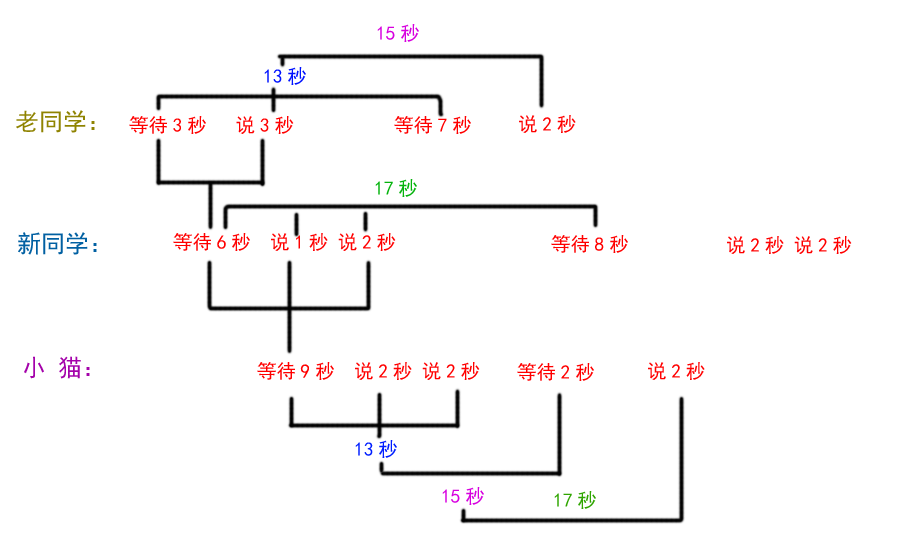
<style>
.page{position:relative;width:902px;height:546px;background:#ffffff}
.page>*{position:absolute;margin:0}
.t1{font:19.4px "SimHei";color:#d700df}
.t2{font:19.4px "SimHei";color:#0012ff}
.t3{font:24px "SimHei";color:#8f8301}
.t4{font:19.4px "SimHei";color:#ff0000}
.t5{font:19.4px "SimHei";color:#04b30c}
.t6{font:24px "SimHei";color:#0160a2}
.t7{font:24px "SimHei";color:#a402aa}
.t8{font:19.4px "SimHei";color:#001eff}
.t9{font:19.4px "SimHei";color:#2fa500}
</style>
<div class="page">
<p class="t1" style="left:377px;top:24px;width:42px;height:18px">15秒</p>
<p class="t2" style="left:264px;top:67px;width:42px;height:18px">13秒</p>
<p class="t3" style="left:16px;top:110px;width:79px;height:23px">老同学：</p>
<p class="t4" style="left:129px;top:116px;width:165px;height:18px">等待3秒   说3秒</p>
<p class="t4" style="left:394px;top:116px;width:77px;height:18px">等待7秒</p>
<p class="t4" style="left:519px;top:115px;width:57px;height:18px">说2秒</p>
<p class="t5" style="left:375px;top:179px;width:42px;height:18px">17秒</p>
<p class="t6" style="left:18px;top:232px;width:79px;height:23px">新同学：</p>
<p class="t4" style="left:173px;top:233px;width:223px;height:18px">等待6秒  说1秒 说2秒</p>
<p class="t4" style="left:551px;top:235px;width:77px;height:18px">等待8秒</p>
<p class="t4" style="left:727px;top:236px;width:125px;height:18px">说2秒 说2秒</p>
<p class="t7" style="left:24px;top:356px;width:66px;height:23px">小 猫：</p>
<p class="t4" style="left:257px;top:362px;width:223px;height:18px">等待9秒  说2秒 说2秒</p>
<p class="t4" style="left:517px;top:363px;width:77px;height:18px">等待2秒</p>
<p class="t4" style="left:648px;top:362px;width:57px;height:18px">说2秒</p>
<p class="t8" style="left:355px;top:440px;width:42px;height:18px">13秒</p>
<p class="t1" style="left:442px;top:487px;width:42px;height:18px">15秒</p>
<p class="t9" style="left:554px;top:491px;width:42px;height:18px">17秒</p>
</div>
